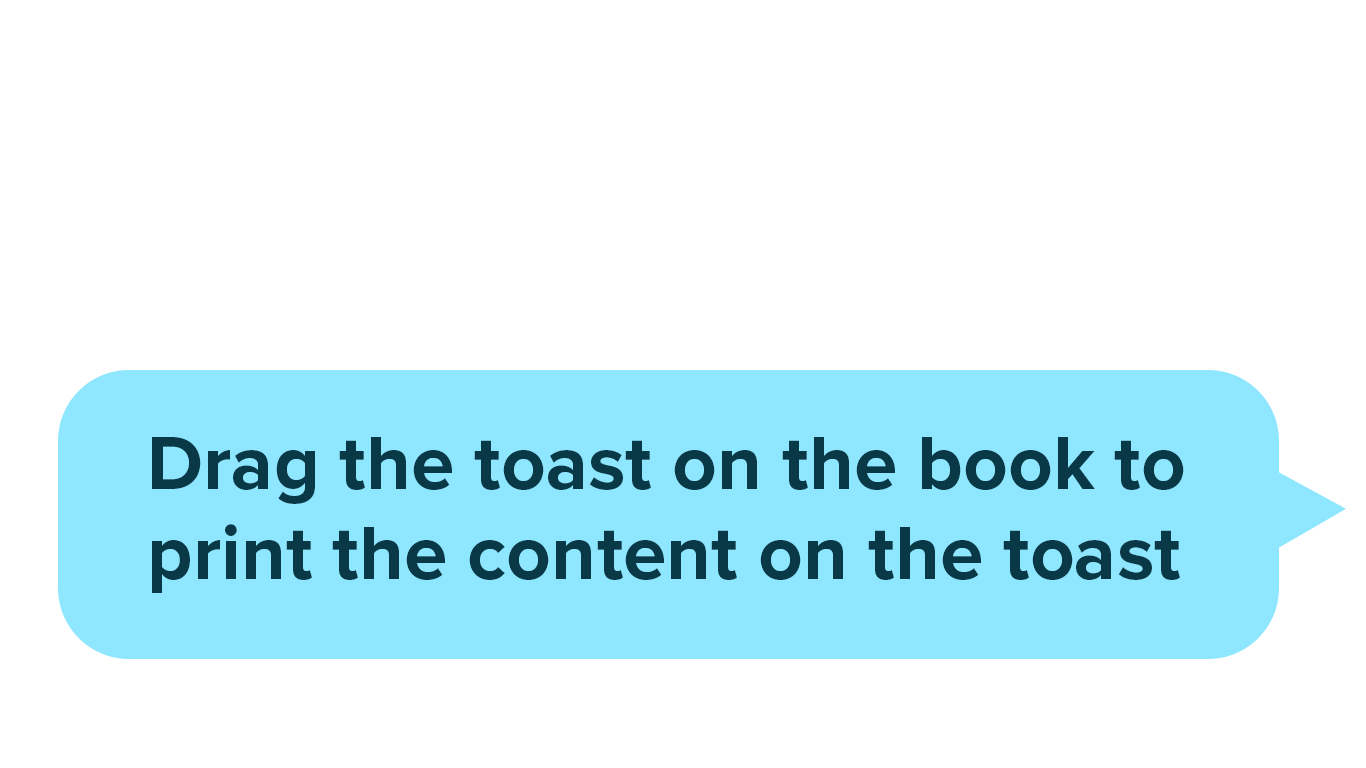
<style>
.page{position:relative;width:1366px;height:768px;background:#ffffff}
.page>*{position:absolute;margin:0}
.t1{font:78px/90px "ProximaNova-Bold";letter-spacing:0.001em;color:#093947}
</style>
<div class="page">
<p class="t1" style="left:152px;top:437px;width:1032px;height:156px">Drag the toast on the book to print the content on the toast</p>
</div>
